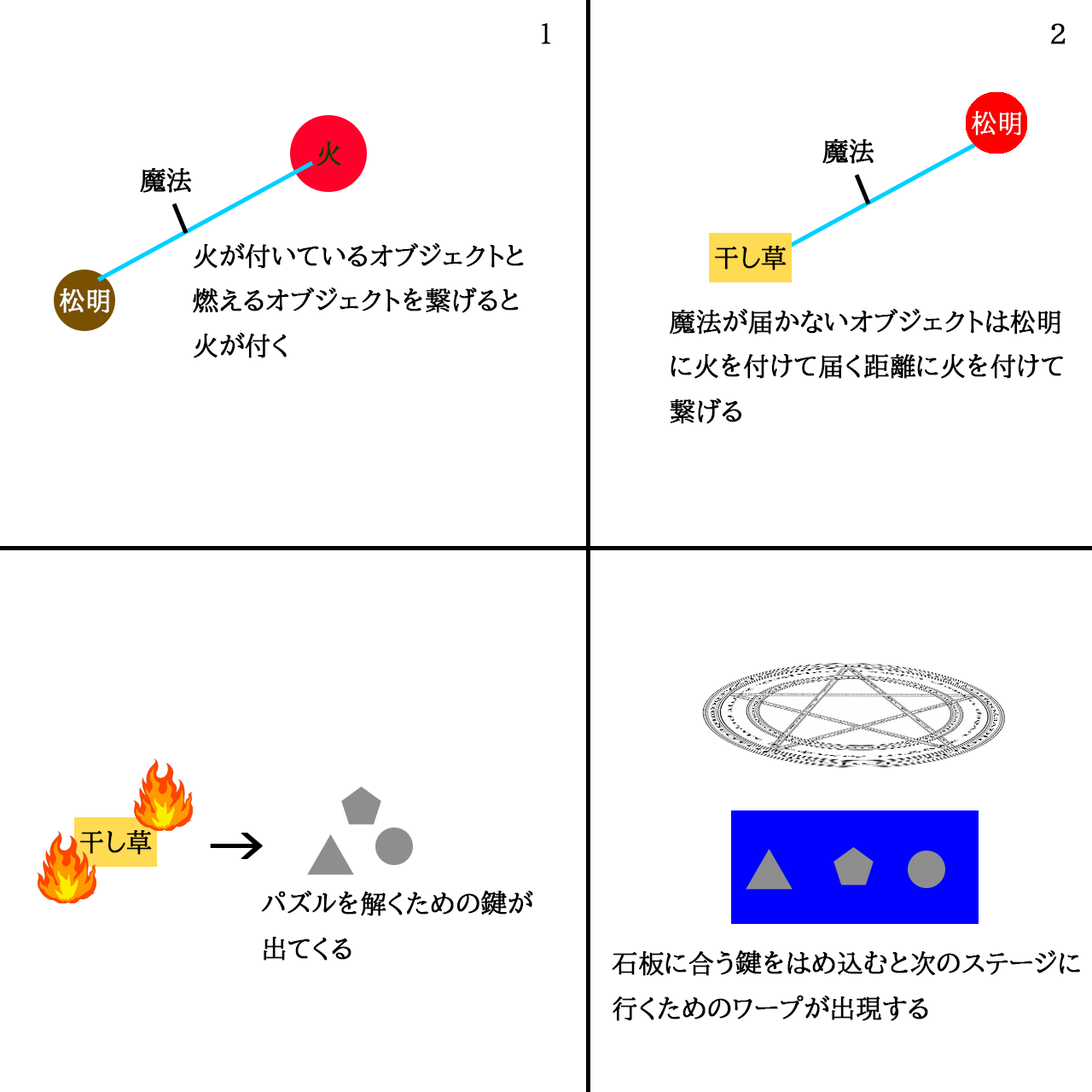
<style>
.page{position:relative;width:1092px;height:1092px;background:#ffffff}
.page>*{position:absolute;margin:0}
.t1{font:25.6px "BIZ-UDPMincho-Medium";color:#000000;font-weight:bold}
.t2{font:61.4px "BIZ-UDPMincho-Medium";color:#000000;font-weight:bold}
</style>
<div class="page">
<p class="t1" style="left:542px;top:23px;width:8px;height:21px">１</p>
<p class="t1" style="left:1051px;top:23px;width:15px;height:21px">2</p>
<p class="t1" style="left:193px;top:243px;width:331px;height:115px">火が付いているオブジェクトと<br>燃えるオブジェクトを繋げると<br>火が付く</p>
<p class="t1" style="left:670px;top:309px;width:393px;height:115px">魔法が届かないオブジェクトは松明<br>に火を付けて届く距離に火を付けて<br>繋げる</p>
<p class="t2" style="left:210px;top:833px;width:53px;height:26px">→</p>
<p class="t1" style="left:261px;top:891px;width:272px;height:70px">パズルを解くための鍵が<br>出てくる</p>
<p class="t1" style="left:612px;top:950px;width:468px;height:71px">石板に合う鍵をはめ込むと次のステージに<br>行くためのワープが出現する</p>
</div>
